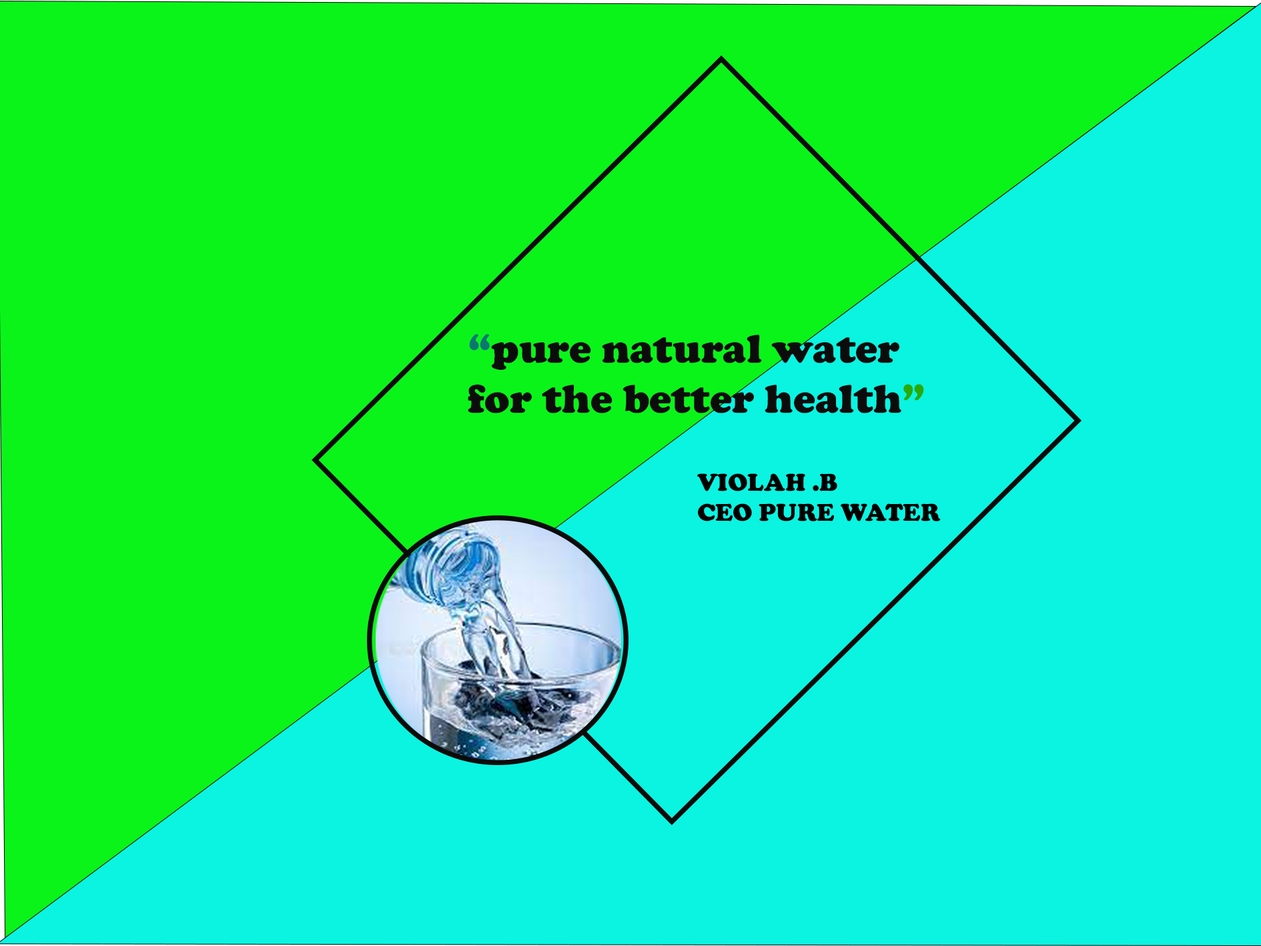
<style>
.page{position:relative;width:1261px;height:946px;background:#0af41a}
.page>*{position:absolute;margin:0}
.t1{font:41.7px "CooperBlack";color:#0d0c0c}
.t2{font:41.7px "CooperBlack";color:#0c7670}
.t3{font:41.7px "CooperBlack";color:#2aaa07}
.t4{font:25px "CooperBlack";color:#000000}
</style>
<div class="page">
<p class="t1" style="left:468px;top:334px;width:456px;height:79px"><span class="t2">“</span>pure natural water <br>for the better health<span class="t3">”</span></p>
<p class="t4" style="left:697px;top:473px;width:244px;height:48px">VIOLAH .B<br>CEO PURE WATER</p>
</div>
